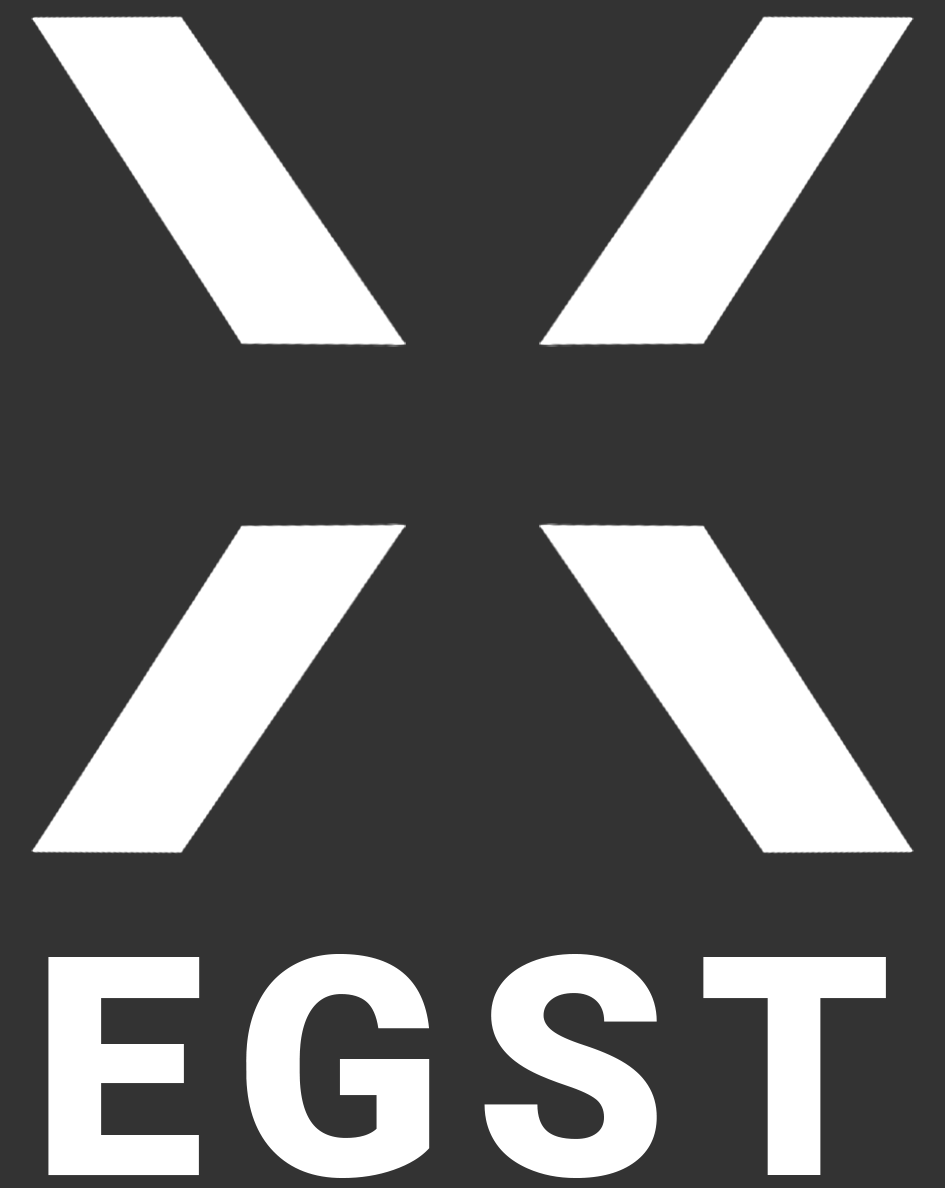
<style>
.page{position:relative;width:945px;height:1188px;background:#333333}
.page>*{position:absolute;margin:0}
.t1{font:307.3px "Roboto-Black";letter-spacing:0.1em;color:#ffffff}
</style>
<div class="page">
<p class="t1" style="left:48px;top:954px;width:838px;height:224px">EGST</p>
</div>
